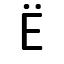
<style>
.page{position:relative;width:64px;height:64px;background:#ffffff}
.page>*{position:absolute;margin:0}
.t1{font:58.3px "Calibri";color:#000000}
</style>
<div class="page">
<p class="t1" style="left:21px;top:4px;width:22px;height:46px">Ё</p>
</div>
